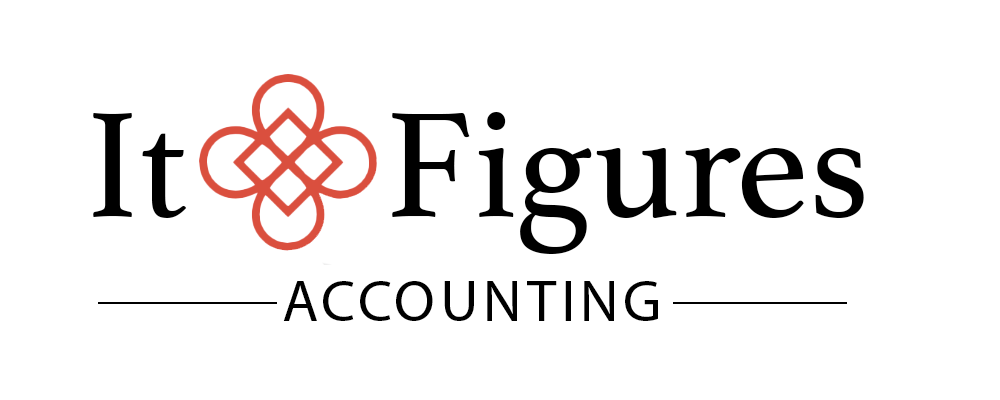
<style>
.page{position:relative;width:1000px;height:400px;background:#ffffff}
.page>*{position:absolute;margin:0}
.t1{font:157px "Athelas-Regular";color:#000000}
.t2{font:59px "MyriadPro-Regular";letter-spacing:0.1em;color:#000000}
</style>
<div class="page">
<p class="t1" style="left:93px;top:112px;width:771px;height:142px">It      Figures</p>
<p class="t2" style="left:283px;top:281px;width:375px;height:40px">ACCOUNTING</p>
</div>
